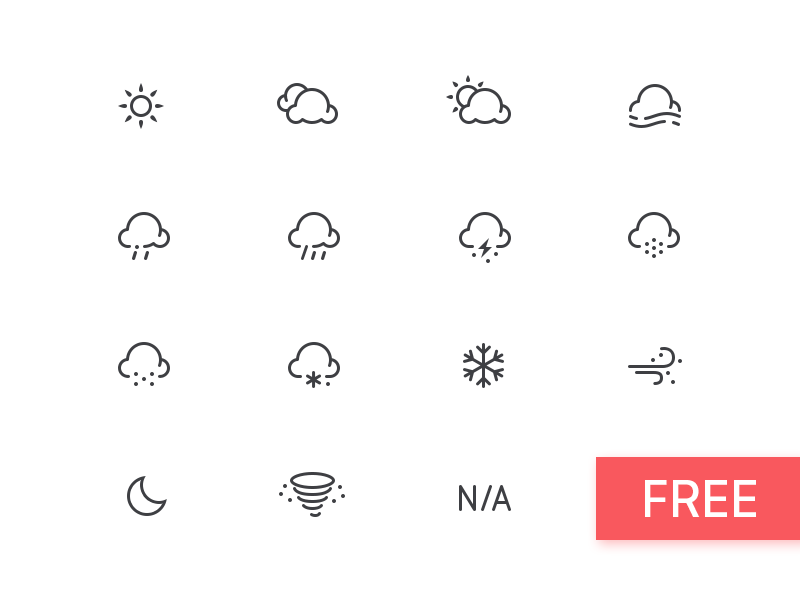
<style>
.page{position:relative;width:800px;height:600px;background:#ffffff}
.page>*{position:absolute;margin:0}
.t1{font:53.9px "SanFranciscoDisplay-Medium";color:#ffffff}
</style>
<div class="page">
<p class="t1" style="left:645px;top:480px;width:111px;height:37px">FREE</p>
</div>
